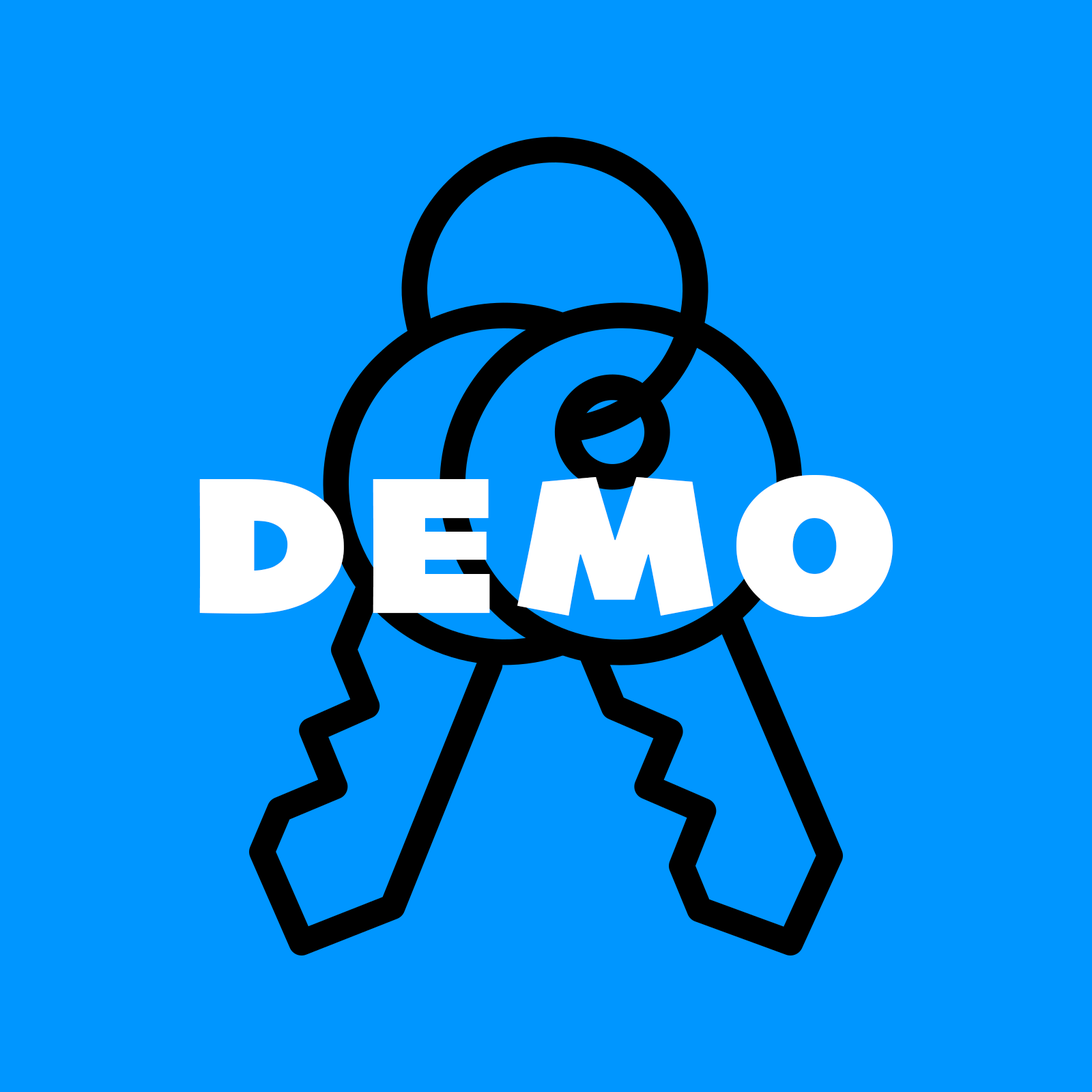
<style>
.page{position:relative;width:1092px;height:1092px;background:#0096ff}
.page>*{position:absolute;margin:0}
.t1{font:204.7px "Skia-Black";letter-spacing:0.1em;color:#ffffff}
</style>
<div class="page">
<p class="t1" style="left:199px;top:475px;width:694px;height:142px">DEMO</p>
</div>
